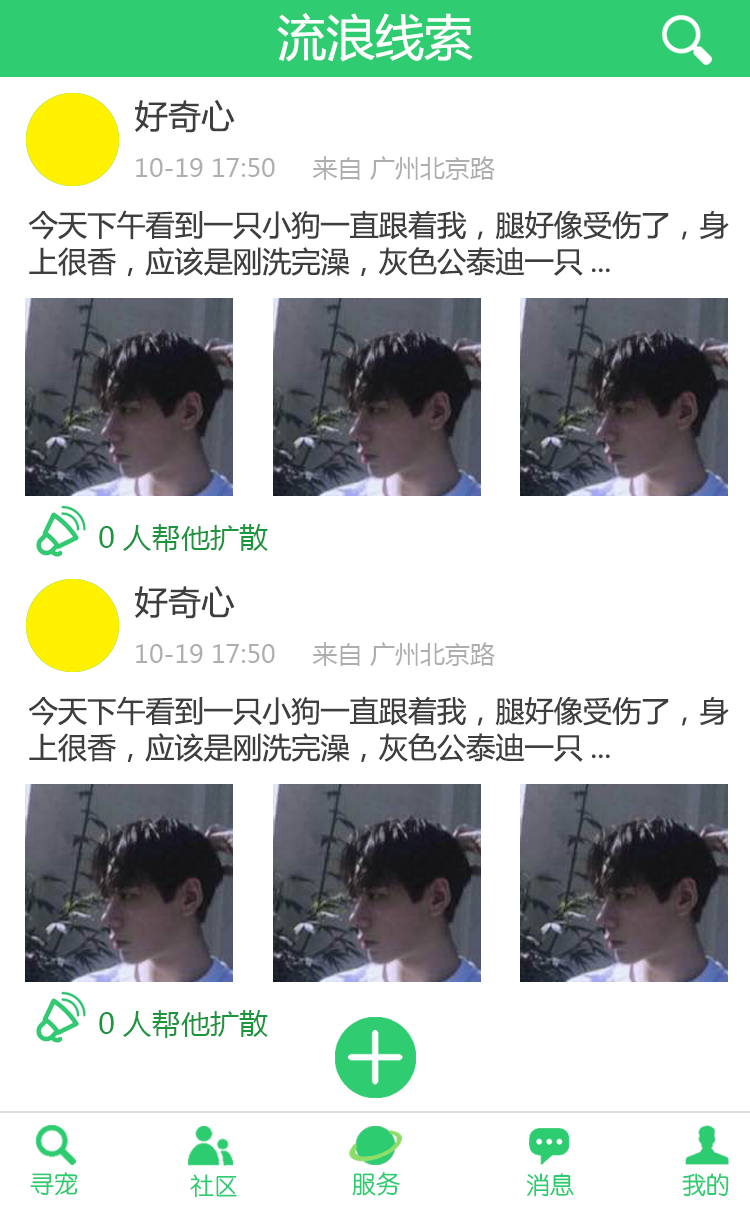
<style>
.page{position:relative;width:750px;height:1206px;background:#ffffff}
.page>*{position:absolute;margin:0}
.t1{font:49px "MicrosoftYaHei";color:#ffffff}
.t2{font:33.3px "MicrosoftYaHei";color:#3e3e3e}
.t3{font:25px "MicrosoftYaHei";color:#adaead}
.t4{font:29.2px/36.5px "MicrosoftYaHei";color:#3e3e3e}
.t5{font:29.2px "MicrosoftYaHei";color:#1d953f}
.t6{font:24px "STYuanti-SC-Regular";color:#2ecc71}
.t7{font:24px "STYuanti-SC-Regular"}
</style>
<div class="page">
<p class="t1" style="left:277px;top:13px;width:196px;height:49px">流浪线索</p>
<p class="t2" style="left:135px;top:99px;width:100px;height:34px">好奇心</p>
<p class="t3" style="left:136px;top:156px;width:359px;height:24px">10-19 17:50     来自 广州北京路</p>
<p class="t4" style="left:28px;top:210px;width:701px;height:66px">今天下午看到一只小狗一直跟着我，腿好像受伤了，身<br>上很香，应该是刚洗完澡，灰色公泰迪一只...</p>
<p class="t5" style="left:99px;top:524px;width:169px;height:28px">0人帮他扩散</p>
<p class="t2" style="left:135px;top:585px;width:100px;height:34px">好奇心</p>
<p class="t3" style="left:136px;top:642px;width:359px;height:24px">10-19 17:50     来自 广州北京路</p>
<p class="t4" style="left:28px;top:696px;width:701px;height:66px">今天下午看到一只小狗一直跟着我，腿好像受伤了，身<br>上很香，应该是刚洗完澡，灰色公泰迪一只...</p>
<p class="t5" style="left:99px;top:1010px;width:169px;height:28px">0人帮他扩散</p>
<p class="t6" style="left:30px;top:1172px;width:48px;height:24px">寻宠</p>
<p class="t6" style="left:190px;top:1174px;width:47px;height:24px">社区</p>
<p class="t6" style="left:352px;top:1172px;width:48px;height:24px">服务</p>
<p class="t7" style="left:526px;top:1173px;width:47px;height:24px">消息</p>
<p class="t6" style="left:527px;top:1173px;width:47px;height:24px">消息</p>
<p class="t6" style="left:682px;top:1173px;width:47px;height:24px">我的</p>
<p class="t6" style="left:682px;top:1173px;width:47px;height:24px">我的</p>
</div>
